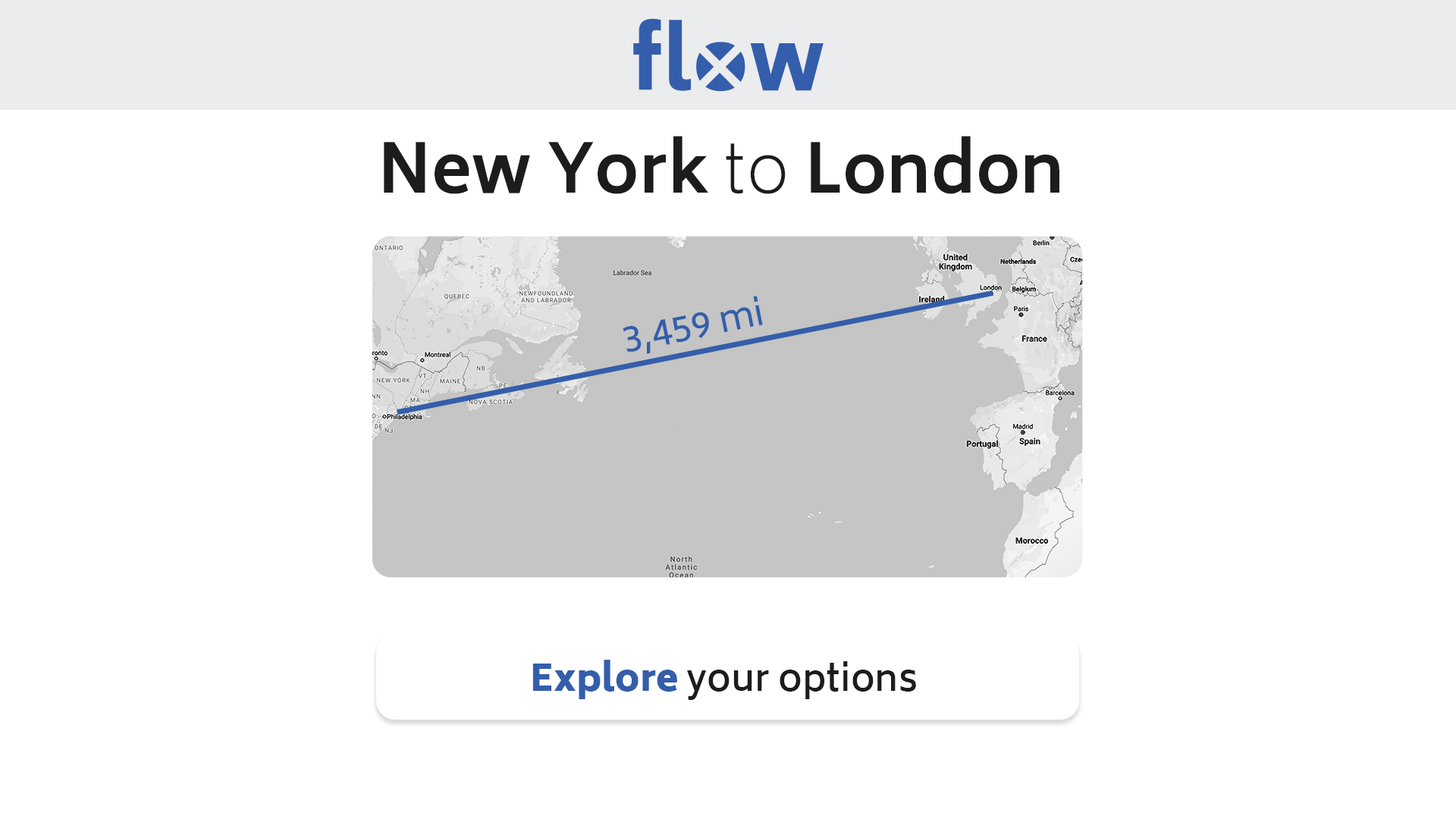
<style>
.page{position:relative;width:1456px;height:819px;background:#ffffff}
.page>*{position:absolute;margin:0}
.t1{font:66.7px "Biryani-Bold";color:#1c1c1c}
.t2{font:66.7px "Biryani-ExtraLight";color:#1c1c1c}
.t3{font:36.4px "Biryani-Regular";color:#345eab}
.t4{font:36.4px "Biryani-SemiBold";color:#1c1c1c}
.t5{font:36.4px "Biryani-Black";color:#345eab}
</style>
<div class="page">
<p class="t1" style="left:384px;top:136px;width:675px;height:58px">New York <span class="t2">to </span>London</p>
<p class="t3" style="left:623px;top:296px;width:140px;height:58px;rotate:-11deg">3,459 mi</p>
<p class="t4" style="left:532px;top:660px;width:384px;height:40px"><span class="t5">Explore </span>your options</p>
</div>
